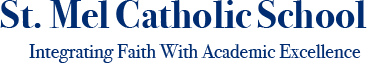
<style>
.page{position:relative;width:369px;height:65px;background:#ffffff}
.page>*{position:absolute;margin:0}
.t1{font:39.7px "BodoniSvtyTwoOSITCTTBold";color:#002c72}
.t2{font:20px "BodoniSvtyTwoOSITCTTBook";color:#002c72}
</style>
<div class="page">
<p class="t1" style="left:0px;top:0px;width:367px;height:28px">St. Mel Catholic School</p>
<p class="t2" style="left:29px;top:44px;width:332px;height:19px">Integrating Faith With Academic Excellence</p>
</div>
